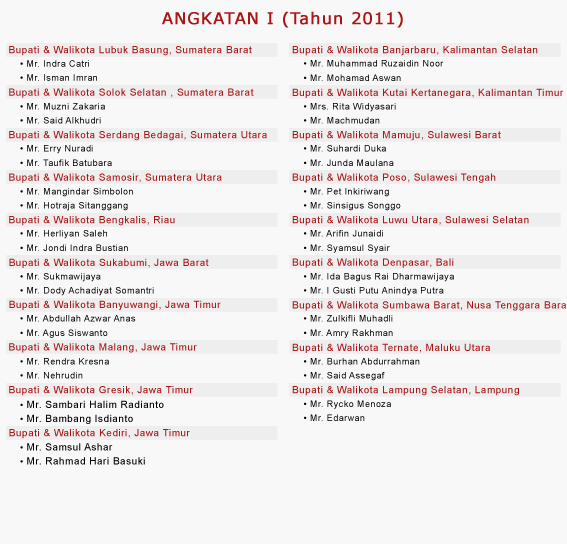
<style>
.page{position:relative;width:567px;height:544px;background:#f8f8f8}
.page>*{position:absolute;margin:0}
.t1{font:16px "Verdana";letter-spacing:0.05em;color:#a91617;font-weight:bold}
.t2{font:10px "ArialMT";letter-spacing:0.05em;color:#a91617}
.t3{font:9px "ArialMT";letter-spacing:0.05em;color:#000000}
.t4{font:10px "ArialMT";letter-spacing:0.05em;color:#000000}
</style>
<div class="page">
<p class="t1" style="left:162px;top:11px;width:241px;height:17px">ANGKATAN I (Tahun 2011)</p>
<p class="t2" style="left:9px;top:46px;width:243px;height:10px">Bupati &amp; Walikota Lubuk Basung, Sumatera Barat</p>
<p class="t2" style="left:292px;top:46px;width:246px;height:10px">Bupati &amp; Walikota Banjarbaru, Kalimantan Selatan</p>
<p class="t3" style="left:20px;top:60px;width:69px;height:7px">• Mr. Indra Catri</p>
<p class="t3" style="left:304px;top:60px;width:140px;height:7px">• Mr. Muhammad Ruzaidin Noor</p>
<p class="t3" style="left:20px;top:74px;width:77px;height:7px">• Mr. Isman Imran</p>
<p class="t3" style="left:304px;top:74px;width:97px;height:7px">• Mr. Mohamad Aswan</p>
<p class="t2" style="left:9px;top:88px;width:245px;height:10px">Bupati &amp; Walikota Solok Selatan , Sumatera Barat</p>
<p class="t2" style="left:292px;top:88px;width:272px;height:10px">Bupati &amp; Walikota Kutai Kertanegara, Kalimantan Timur</p>
<p class="t3" style="left:20px;top:103px;width:85px;height:7px">• Mr. Muzni Zakaria</p>
<p class="t3" style="left:304px;top:103px;width:92px;height:9px">• Mrs. Rita Widyasari</p>
<p class="t3" style="left:20px;top:117px;width:81px;height:7px">• Mr. Said Alkhudri</p>
<p class="t3" style="left:304px;top:117px;width:76px;height:7px">• Mr. Machmudan</p>
<p class="t2" style="left:9px;top:131px;width:258px;height:10px">Bupati &amp; Walikota Serdang Bedagai, Sumatera Utara</p>
<p class="t2" style="left:292px;top:131px;width:209px;height:10px">Bupati &amp; Walikota Mamuju, Sulawesi Barat</p>
<p class="t3" style="left:20px;top:145px;width:73px;height:9px">• Mr. Erry Nuradi</p>
<p class="t3" style="left:304px;top:145px;width:82px;height:7px">• Mr. Suhardi Duka</p>
<p class="t3" style="left:20px;top:159px;width:92px;height:7px">• Mr. Taufik Batubara</p>
<p class="t3" style="left:304px;top:159px;width:90px;height:7px">• Mr. Junda Maulana</p>
<p class="t2" style="left:9px;top:173px;width:213px;height:10px">Bupati &amp; Walikota Samosir, Sumatera Utara</p>
<p class="t2" style="left:292px;top:173px;width:204px;height:10px">Bupati &amp; Walikota Poso, Sulawesi Tengah</p>
<p class="t3" style="left:20px;top:188px;width:113px;height:9px">• Mr. Mangindar Simbolon</p>
<p class="t3" style="left:304px;top:188px;width:85px;height:9px">• Mr. Pet Inkiriwang</p>
<p class="t3" style="left:20px;top:202px;width:108px;height:9px">• Mr. Hotraja Sitanggang</p>
<p class="t3" style="left:304px;top:202px;width:97px;height:9px">• Mr. Sinsigus Songgo</p>
<p class="t2" style="left:9px;top:216px;width:166px;height:10px">Bupati &amp; Walikota Bengkalis, Riau</p>
<p class="t2" style="left:292px;top:216px;width:237px;height:10px">Bupati &amp; Walikota Luwu Utara, Sulawesi Selatan</p>
<p class="t3" style="left:20px;top:230px;width:87px;height:9px">• Mr. Herliyan Saleh</p>
<p class="t3" style="left:304px;top:230px;width:79px;height:7px">• Mr. Arifin Junaidi</p>
<p class="t3" style="left:20px;top:244px;width:108px;height:7px">• Mr. Jondi Indra Bustian</p>
<p class="t3" style="left:304px;top:244px;width:86px;height:9px">• Mr. Syamsul Syair</p>
<p class="t2" style="left:9px;top:258px;width:200px;height:10px">Bupati &amp; Walikota Sukabumi, Jawa Barat</p>
<p class="t2" style="left:292px;top:258px;width:162px;height:10px">Bupati &amp; Walikota Denpasar, Bali</p>
<p class="t3" style="left:20px;top:273px;width:81px;height:9px">• Mr. Sukmawijaya</p>
<p class="t3" style="left:304px;top:273px;width:150px;height:9px">• Mr. Ida Bagus Rai Dharmawijaya</p>
<p class="t3" style="left:20px;top:287px;width:134px;height:9px">• Mr. Dody Achadiyat Somantri</p>
<p class="t3" style="left:304px;top:287px;width:140px;height:9px">• Mr. I Gusti Putu Anindya Putra</p>
<p class="t2" style="left:9px;top:300px;width:212px;height:10px">Bupati &amp; Walikota Banyuwangi, Jawa Timur</p>
<p class="t3" style="left:20px;top:315px;width:116px;height:7px">• Mr. Abdullah Azwar Anas</p>
<p class="t3" style="left:304px;top:315px;width:89px;height:7px">• Mr. Zulkifli Muhadli</p>
<p class="t3" style="left:20px;top:329px;width:88px;height:9px">• Mr. Agus Siswanto</p>
<p class="t3" style="left:304px;top:329px;width:89px;height:9px">• Mr. Amry Rakhman</p>
<p class="t2" style="left:9px;top:343px;width:188px;height:10px">Bupati &amp; Walikota Malang, Jawa Timur</p>
<p class="t2" style="left:292px;top:343px;width:198px;height:10px">Bupati &amp; Walikota Ternate, Maluku Utara</p>
<p class="t3" style="left:20px;top:358px;width:89px;height:7px">• Mr. Rendra Kresna</p>
<p class="t3" style="left:304px;top:358px;width:116px;height:7px">• Mr. Burhan Abdurrahman</p>
<p class="t3" style="left:20px;top:372px;width:63px;height:7px">• Mr. Nehrudin</p>
<p class="t3" style="left:304px;top:372px;width:81px;height:9px">• Mr. Said Assegaf</p>
<p class="t2" style="left:9px;top:386px;width:184px;height:10px">Bupati &amp; Walikota Gresik, Jawa Timur</p>
<p class="t2" style="left:292px;top:386px;width:227px;height:10px">Bupati &amp; Walikota Lampung Selatan, Lampung</p>
<p class="t4" style="left:20px;top:400px;width:144px;height:8px"><span class="t3">• </span>Mr. Sambari Halim Radianto</p>
<p class="t3" style="left:304px;top:400px;width:87px;height:9px">• Mr. Rycko Menoza</p>
<p class="t4" style="left:20px;top:414px;width:113px;height:10px"><span class="t3">• </span>Mr. Bambang Isdianto</p>
<p class="t3" style="left:304px;top:414px;width:61px;height:7px">• Mr. Edarwan</p>
<p class="t2" style="left:9px;top:429px;width:181px;height:10px">Bupati &amp; Walikota Kediri, Jawa Timur</p>
<p class="t4" style="left:20px;top:443px;width:93px;height:8px"><span class="t3">• </span>Mr. Samsul Ashar</p>
<p class="t4" style="left:20px;top:457px;width:125px;height:8px"><span class="t3">• </span>Mr. Rahmad Hari Basuki</p>
</div>
